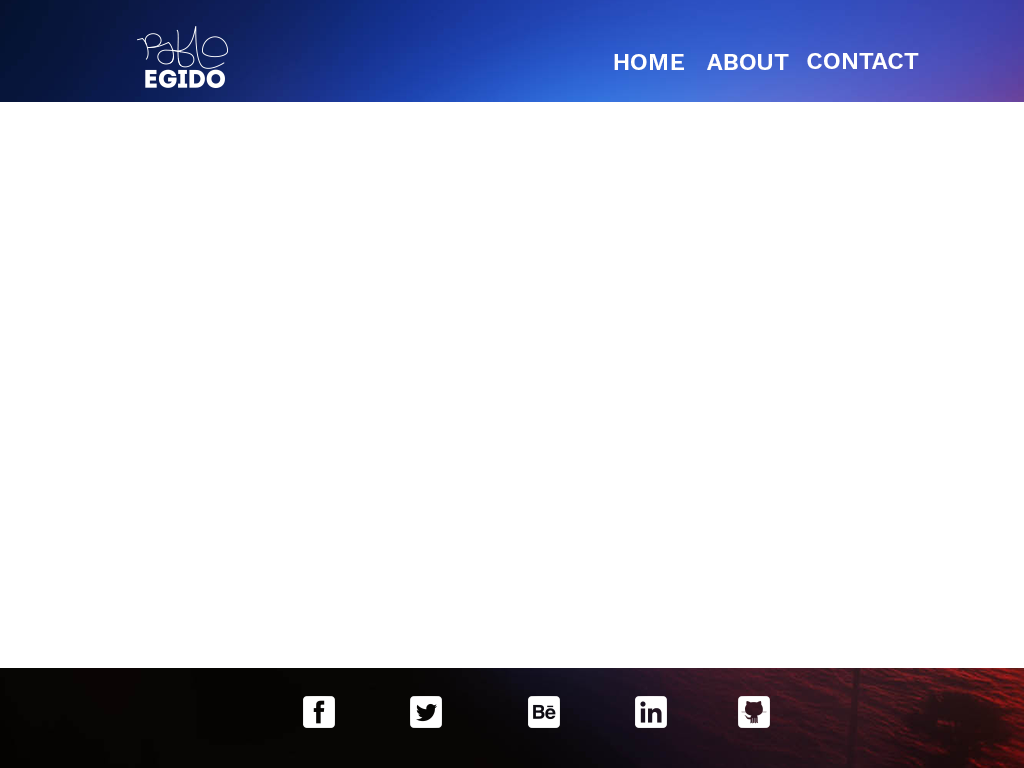
<style>
.page{position:relative;width:1024px;height:768px;background:#ffffff}
.page>*{position:absolute;margin:0}
.t1{font:24px "WorkSans-SemiBold";color:#ffffff}
</style>
<div class="page">
<p class="t1" style="left:614px;top:54px;width:70px;height:16px">HOME</p>
<p class="t1" style="left:707px;top:54px;width:82px;height:16px">ABOUT</p>
<p class="t1" style="left:807px;top:53px;width:112px;height:16px">CONTACT</p>
</div>
